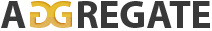
<style>
.page{position:relative;width:212px;height:31px;background:#ffffff}
.page>*{position:absolute;margin:0}
.t1{font:40px "MyriadPro-Bold";color:#393939}
</style>
<div class="page">
<p class="t1" style="left:1px;top:1px;width:209px;height:27px">A      REGATE</p>
</div>
